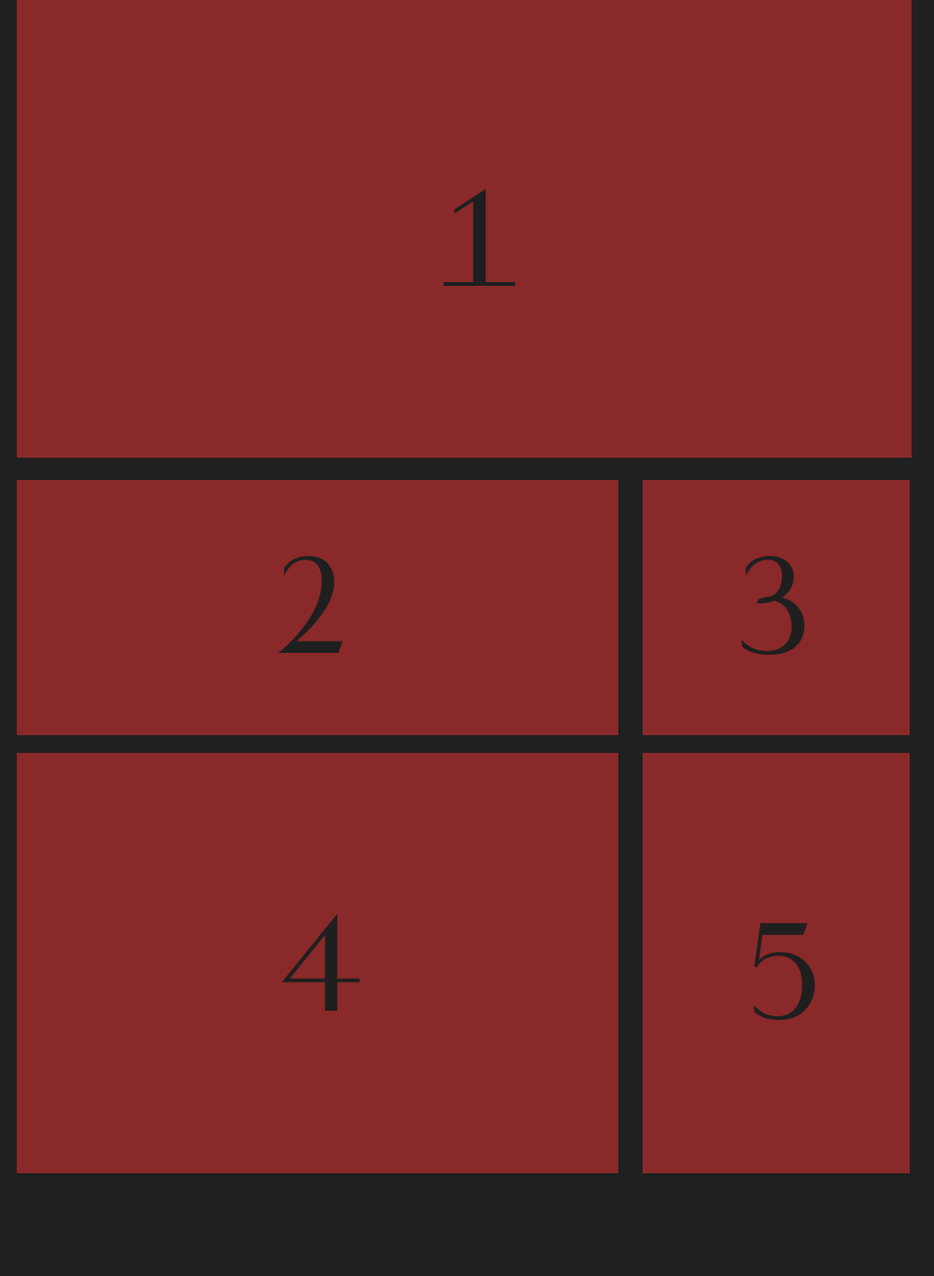
<style>
.page{position:relative;width:934px;height:1276px;background:#8a2929}
.page>*{position:absolute;margin:0}
.t1{font:140.1px "Vanitas-Extrabold";color:#1f1f1f}
</style>
<div class="page">
<p class="t1" style="left:444px;top:189px;width:72px;height:97px">1</p>
<p class="t1" style="left:277px;top:556px;width:66px;height:97px">2</p>
<p class="t1" style="left:742px;top:556px;width:63px;height:99px">3</p>
<p class="t1" style="left:281px;top:914px;width:80px;height:97px">4</p>
<p class="t1" style="left:754px;top:923px;width:62px;height:97px">5</p>
</div>
